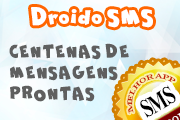
<style>
.page{position:relative;width:180px;height:120px}
.page>*{position:absolute;margin:0}
.t1{font:22.9px "ComicaBD-Bold";color:#ffffff}
.t2{font:17.5px "ComicaBD-Bold";color:#5f5f5f}
.t3{font:6.8px "TimesNewRomanPS-BoldMT";letter-spacing:-0.01em;color:#c31c00}
.t4{font:26px "TimesNewRomanPS-BoldMT";letter-spacing:-0.07em;color:#000000;scale:0.72 1}
</style>
<div class="page">
<p class="t1" style="left:31px;top:7px;width:122px;height:21px">Droido SMS</p>
<p class="t2" style="left:9px;top:43px;width:120px;height:59px">CENTENAS DE <br>MENSAGENS <br>PRONTAS</p>
<p class="t3" style="left:127px;top:73px;width:49px;height:41px;rotate:-30deg">MELHOR APP</p>
<p class="t4" style="left:140px;top:85px;width:36px;height:33px;rotate:-30deg">SMS</p>
</div>
